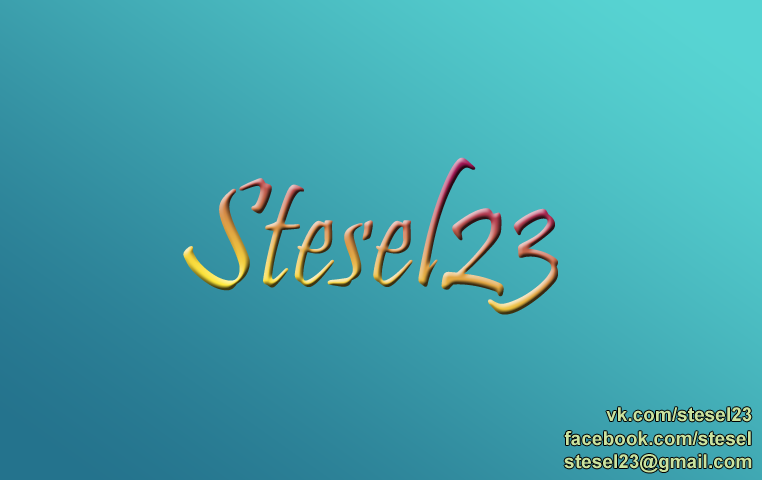
<style>
.page{position:relative;width:762px;height:480px}
.page>*{position:absolute;margin:0}
.t1{font:156.3px "Pristina-Regular";scale:0.94 1}
.t2{font:19.1px "Arial-BoldMT";color:#cae39f}
</style>
<div class="page">
<p class="t1" style="left:183px;top:157px;width:375px;height:158px">Stesel23</p>
<p class="t2" style="left:606px;top:407px;width:146px;height:15px">vk.com/stesel23</p>
<p class="t2" style="left:564px;top:431px;width:187px;height:15px">facebook.com/stesel</p>
<p class="t2" style="left:564px;top:454px;width:188px;height:19px">stesel23@gmail.com</p>
</div>
